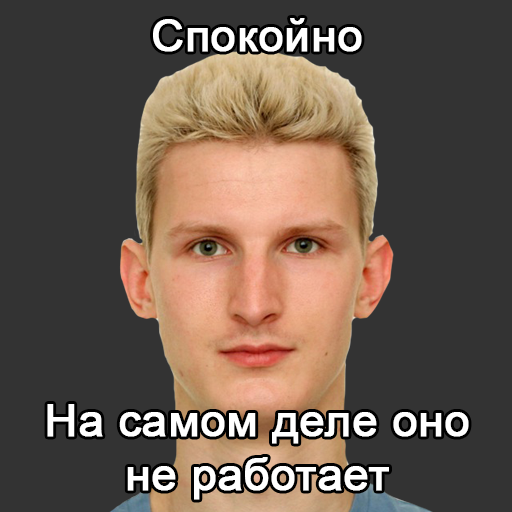
<style>
.page{position:relative;width:512px;height:512px;background:#333333}
.page>*{position:absolute;margin:0}
.t1{font:45px "ArialMT";color:#ffffff;font-weight:bold}
</style>
<div class="page">
<p class="t1" style="left:153px;top:18px;width:209px;height:34px">Спокойно</p>
<p class="t1" style="left:47px;top:404px;width:422px;height:96px;text-align:center">На самом деле оно<br>не работает</p>
</div>
